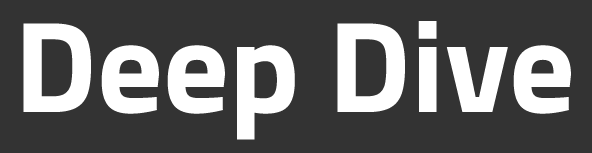
<style>
.page{position:relative;width:592px;height:153px;background:#333333}
.page>*{position:absolute;margin:0}
.t1{font:130px "Cairo-Bold";color:#fefefe}
</style>
<div class="page">
<p class="t1" style="left:23px;top:21px;width:548px;height:119px">Deep Dive</p>
</div>
